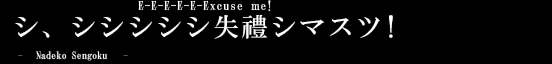
<style>
.page{position:relative;width:552px;height:64px;background:#000000}
.page>*{position:absolute;margin:0}
.t1{font:12px/13px "HGMinchoB";letter-spacing:0.075em;color:#ffffff}
.t2{font:12px/13px "HGMinchoB";letter-spacing:0.075em;color:#ffffff;scale:0.8 1}
.t3{font:26px/13px "HGMinchoB";letter-spacing:0.1em;color:#ffffff}
.t4{font:10px "HGMinchoB";letter-spacing:0.01em;color:#ffffff}
</style>
<div class="page">
<p class="t1" style="left:15px;top:0px;width:378px;height:39px;text-align:center">E-E-E-E-E-Excuse <span class="t2">ｍ</span>e! <br><br><span class="t3">シ、シシシシシ失禮シマスツ!</span></p>
<p class="t4" style="left:36px;top:51px;width:71px;height:10px">Nadeko Sengoku</p>
</div>
